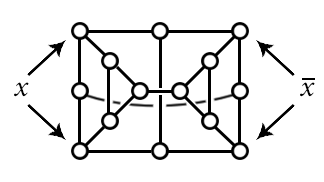
<style>
.page{position:relative;width:324px;height:182px;background:#ffffff}
.page>*{position:absolute;margin:0}
.t1{font:30px "MinionPro-It";color:#000000}
</style>
<div class="page">
<p class="t1" style="left:14px;top:82px;width:15px;height:15px">x</p>
<p class="t1" style="left:300px;top:82px;width:15px;height:15px">x</p>
</div>
